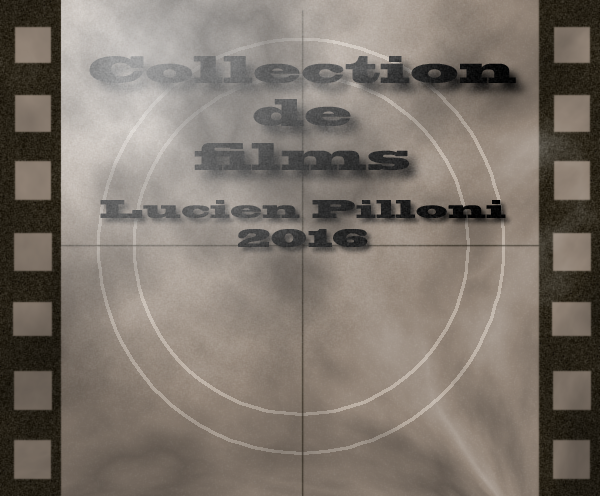
<style>
.page{position:relative;width:600px;height:496px}
.page>*{position:absolute;margin:0}
.t1{font:36.1px "BlackoakStd"}
.t2{font:24px "BlackoakStd"}
</style>
<div class="page">
<p class="t1" style="left:89px;top:56px;width:427px;height:114px;text-align:center">Collection<br>de<br>films</p>
<p class="t2" style="left:100px;top:200px;width:406px;height:47px;text-align:center">Lucien Pilloni<br>2016</p>
</div>
